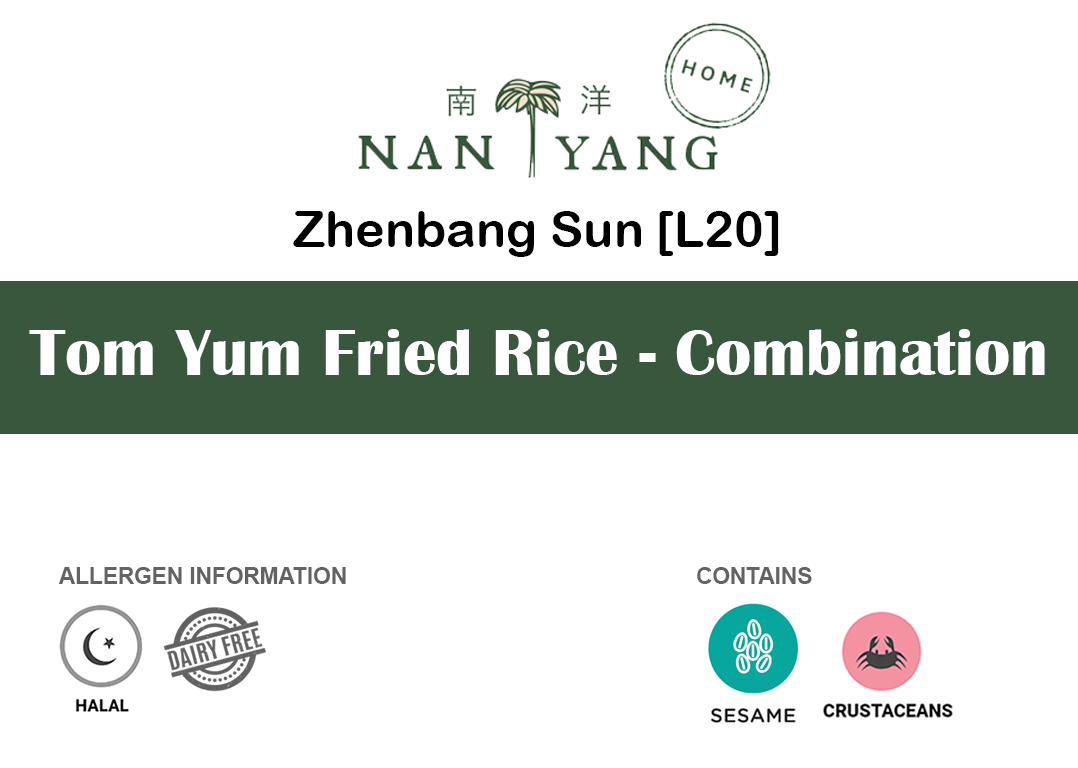
<style>
.page{position:relative;width:1078px;height:768px;background:#ffffff}
.page>*{position:absolute;margin:0}
.t1{font:50px "ArialRoundedMTBold";color:#000000}
.t2{font:66.7px "BritannicBold";color:#ffffff}
.t3{font:22.6px "Arial-BoldMT";color:#636363}
</style>
<div class="page">
<p class="t1" style="left:293px;top:211px;width:486px;height:46px">Zhenbang Sun [L20]</p>
<p class="t2" style="left:29px;top:329px;width:1016px;height:46px">Tom Yum Fried Rice - Combination</p>
<p class="t3" style="left:58px;top:567px;width:288px;height:17px">ALLERGEN INFORMATION</p>
<p class="t3" style="left:697px;top:567px;width:115px;height:17px">CONTAINS</p>
</div>
